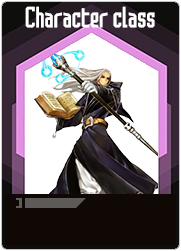
<style>
.page{position:relative;width:181px;height:251px;background:#ffffff}
.page>*{position:absolute;margin:0}
.t1{font:25.7px "SAOUI-Regular";color:#ffffff}
</style>
<div class="page">
<p class="t1" style="left:25px;top:6px;width:130px;height:22px">Character class</p>
</div>
